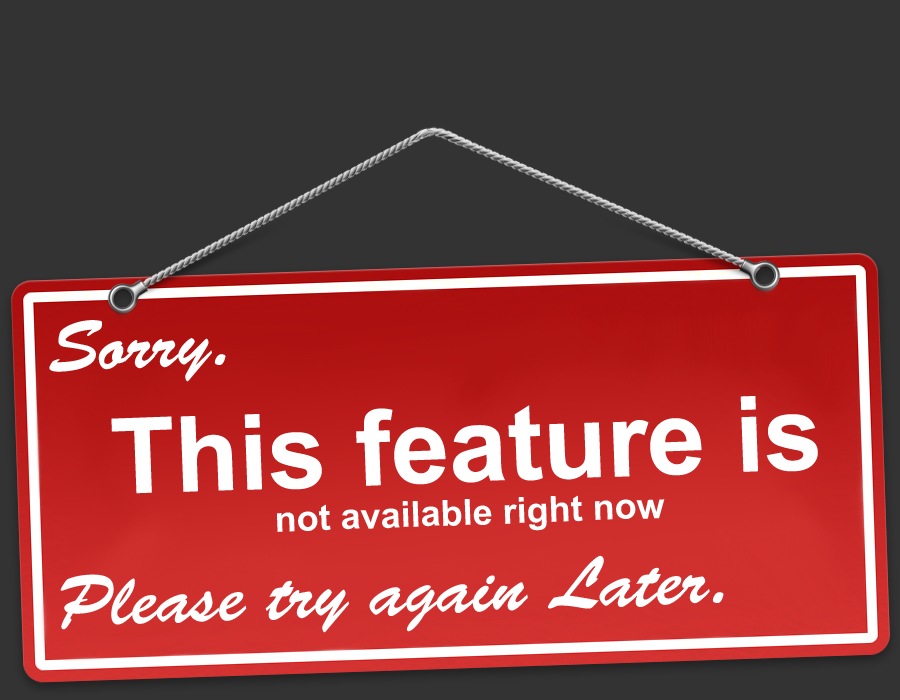
<style>
.page{position:relative;width:900px;height:700px;background:#333333}
.page>*{position:absolute;margin:0}
.t1{font:36px "Arial-BoldMT";color:#ffffff}
.t2{font:72px "BrushScriptStd";color:#ffffff}
.t3{font:105px "Arial-BoldMT";color:#ffffff}
</style>
<div class="page">
<p class="t1" style="left:49px;top:320px;width:769px;height:313px;rotate:-2deg"><span class="t2">Sorry.<br></span><span class="t3">  This feature is<br></span>                      not available right now<br><span class="t2">Please try again Later.</span></p>
</div>
